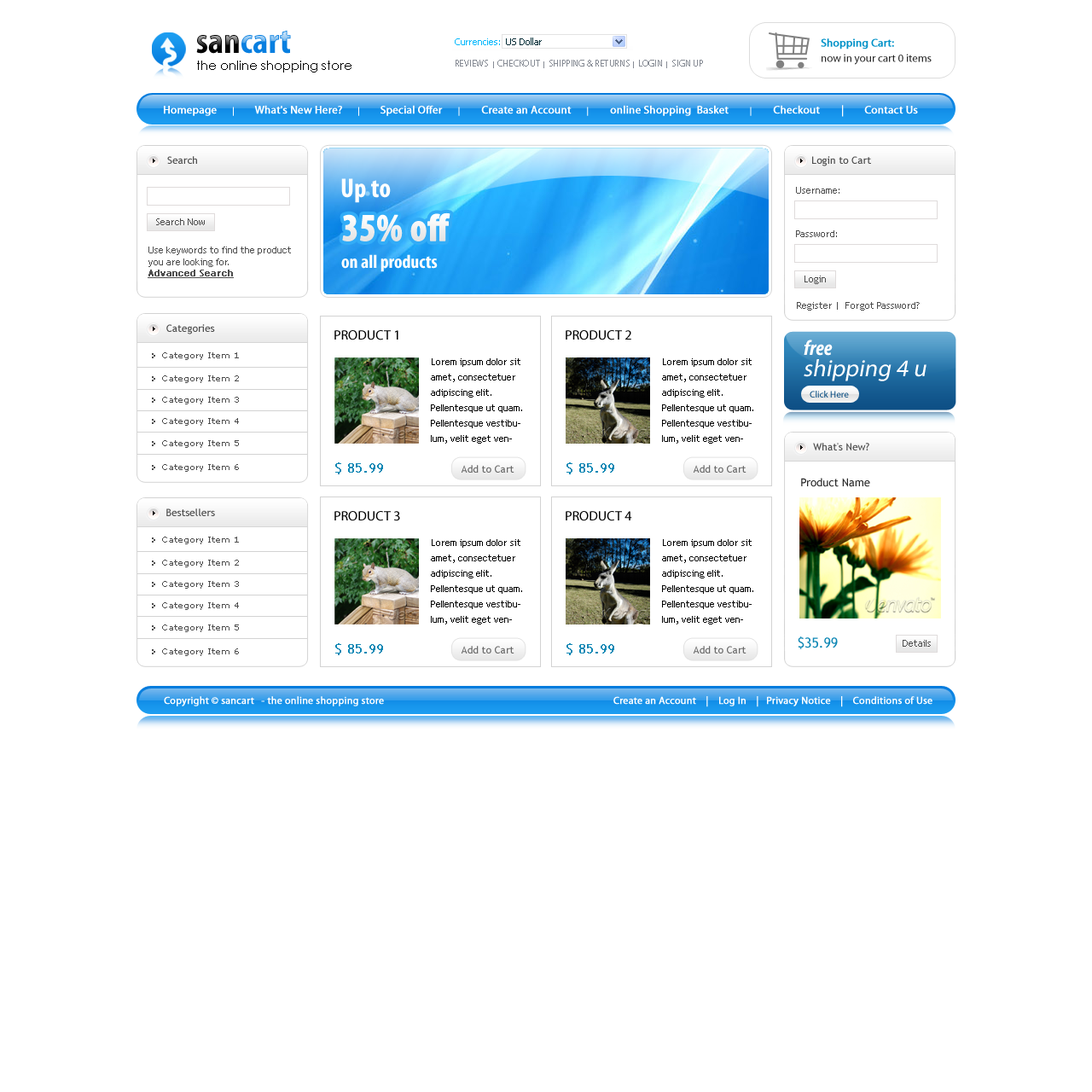
<style>
.page{position:relative;width:1092px;height:1092px;background:#ffffff}
.page>*{position:absolute;margin:0}
.t1{font:36.7px "MyriadPro-BoldCond"}
.t2{font:11.1px/15.4px "MyriadPro-Regular";color:#282828}
.t3{font:11.1px/15.4px "MyriadPro-Regular";color:#0292c8;font-weight:bold}
.t4{font:12.8px "CenturyGothic";color:#000000}
.t5{font:9.4px "MyriadPro-Regular";color:#868b94}
.t6{font:6.8px "MyriadPro-Regular";color:#868b94}
.t7{font:11.1px "MyriadPro-Regular";color:#ffffff;font-weight:bold}
.t8{font:8.5px "MyriadPro-Regular";color:#ffffff;font-weight:bold}
.t9{font:10.2px "TrebuchetMS";color:#4d4d4d}
.t10{font:27.3px "MyriadPro-BoldCond";color:#fefefe}
.t11{font:9.4px "TrebuchetMS";color:#4d4d4d}
.t12{font:38.4px "MyriadPro-BoldCond";color:#fefefe;font-weight:bold}
.t13{font:9.4px "TrebuchetMS";color:#4d4d4d;font-weight:bold;text-decoration:underline}
.t14{font:18.8px "MyriadPro-BoldCond";color:#fefefe}
.t15{font:13.6px "MyriadPro-Regular";color:#010101;text-transform:uppercase}
.t16{font:21.3px "MyriadPro-BoldCondIt";color:#ffffff}
.t17{font:8.5px "Verdana";color:#4d4d4d}
.t18{font:9.4px/15.4px "TrebuchetMS";color:#000000}
.t19{font:23.9px "MyriadPro-Regular";color:#ffffff;font-style:italic}
.t20{font:9.4px "MyriadPro-Regular";color:#064b80}
.t21{font:13.6px "TrebuchetMS";color:#1088b5;font-weight:bold}
.t22{font:10.2px "TrebuchetMS";color:#6a6a6a}
.t23{font:11.1px "TrebuchetMS";color:#292929}
.t24{font:13.6px "TrebuchetMS";color:#1088b5}
.t25{font:10.2px "MyriadPro-Regular";color:#ffffff;font-weight:bold}
</style>
<div class="page">
<p class="t1" style="left:196px;top:30px;width:95px;height:24px">sancart</p>
<p class="t2" style="left:821px;top:38px;width:111px;height:27px"><span class="t3">Shopping Cart: <br></span>now in your cart 0 items</p>
<p class="t4" style="left:197px;top:61px;width:154px;height:12px">the online shopping store</p>
<p class="t5" style="left:456px;top:60px;width:247px;height:8px">REVIEWS  <span class="t6">|  </span>CHECKOUT  <span class="t6">|  </span>SHIPPING &amp; RETURNS  <span class="t6">|  </span>LOGIN  <span class="t6">| </span> SIGN UP</p>
<p class="t7" style="left:164px;top:105px;width:754px;height:12px">Homepage     <span class="t8"> | </span>       What's New Here?     <span class="t8"> |  </span>      Special Offer      <span class="t8">|</span>        Create an Account     <span class="t8"> |</span>        online Shopping  Basket        <span class="t8">|</span>        Checkout        |        Contact Us</p>
<p class="t9" style="left:167px;top:156px;width:30px;height:8px">Search</p>
<p class="t9" style="left:812px;top:156px;width:59px;height:10px">Login to Cart</p>
<p class="t10" style="left:341px;top:178px;width:50px;height:25px">Up to</p>
<p class="t11" style="left:796px;top:187px;width:43px;height:7px">Username:</p>
<p class="t11" style="left:156px;top:218px;width:49px;height:7px">Search Now</p>
<p class="t12" style="left:342px;top:212px;width:108px;height:29px">35% off</p>
<p class="t11" style="left:796px;top:230px;width:41px;height:7px">Password:</p>
<p class="t11" style="left:148px;top:247px;width:143px;height:31px">Use keywords to find the product you are looking for.<br><span class="t13">Advanced Search</span></p>
<p class="t14" style="left:341px;top:254px;width:97px;height:18px">on all products</p>
<p class="t11" style="left:804px;top:276px;width:22px;height:8px">Login</p>
<p class="t11" style="left:797px;top:302px;width:123px;height:9px">Register |  Forgot Password?</p>
<p class="t9" style="left:166px;top:324px;width:49px;height:10px">Categories</p>
<p class="t15" style="left:334px;top:330px;width:64px;height:10px">Product 1</p>
<p class="t15" style="left:566px;top:330px;width:65px;height:10px">Product 2</p>
<p class="t16" style="left:804px;top:340px;width:29px;height:16px">free</p>
<p class="t17" style="left:162px;top:352px;width:77px;height:8px">Category Item 1</p>
<p class="t18" style="left:431px;top:358px;width:91px;height:86px">Lorem ipsum dolor sit amet, consectetuer adipiscing elit. Pellentesque ut quam. Pellentesque vestibulum, velit eget venenatis auct ...</p>
<p class="t18" style="left:662px;top:358px;width:91px;height:86px">Lorem ipsum dolor sit amet, consectetuer adipiscing elit. Pellentesque ut quam. Pellentesque vestibulum, velit eget venenatis auct ...</p>
<p class="t19" style="left:804px;top:359px;width:122px;height:22px">shipping 4 u</p>
<p class="t17" style="left:162px;top:375px;width:77px;height:8px">Category Item 2</p>
<p class="t17" style="left:162px;top:397px;width:77px;height:7px">Category Item 3</p>
<p class="t20" style="left:810px;top:391px;width:39px;height:7px">Click Here</p>
<p class="t17" style="left:162px;top:418px;width:77px;height:8px">Category Item 4</p>
<p class="t17" style="left:162px;top:440px;width:77px;height:8px">Category Item 5</p>
<p class="t9" style="left:813px;top:443px;width:56px;height:7px">What's New?</p>
<p class="t17" style="left:162px;top:464px;width:77px;height:8px">Category Item 6</p>
<p class="t21" style="left:335px;top:462px;width:48px;height:12px">$ 85.99</p>
<p class="t22" style="left:461px;top:465px;width:53px;height:8px">Add to Cart</p>
<p class="t21" style="left:566px;top:462px;width:48px;height:12px">$ 85.99</p>
<p class="t22" style="left:693px;top:465px;width:53px;height:8px">Add to Cart</p>
<p class="t23" style="left:801px;top:478px;width:69px;height:9px">Product Name</p>
<p class="t9" style="left:166px;top:508px;width:49px;height:8px">Bestsellers</p>
<p class="t15" style="left:334px;top:511px;width:66px;height:10px">Product 3</p>
<p class="t15" style="left:566px;top:511px;width:66px;height:10px">Product 4</p>
<p class="t17" style="left:162px;top:537px;width:77px;height:7px">Category Item 1</p>
<p class="t18" style="left:431px;top:539px;width:91px;height:85px">Lorem ipsum dolor sit amet, consectetuer adipiscing elit. Pellentesque ut quam. Pellentesque vestibulum, velit eget venenatis auct ...</p>
<p class="t18" style="left:662px;top:539px;width:91px;height:85px">Lorem ipsum dolor sit amet, consectetuer adipiscing elit. Pellentesque ut quam. Pellentesque vestibulum, velit eget venenatis auct ...</p>
<p class="t17" style="left:162px;top:560px;width:77px;height:7px">Category Item 2</p>
<p class="t17" style="left:162px;top:581px;width:77px;height:8px">Category Item 3</p>
<p class="t17" style="left:162px;top:602px;width:77px;height:8px">Category Item 4</p>
<p class="t17" style="left:162px;top:624px;width:77px;height:8px">Category Item 5</p>
<p class="t24" style="left:798px;top:636px;width:40px;height:13px">$35.99</p>
<p class="t11" style="left:903px;top:640px;width:28px;height:7px">Details</p>
<p class="t17" style="left:162px;top:648px;width:77px;height:8px">Category Item 6</p>
<p class="t21" style="left:335px;top:643px;width:48px;height:12px">$ 85.99</p>
<p class="t22" style="left:461px;top:646px;width:53px;height:7px">Add to Cart</p>
<p class="t21" style="left:566px;top:643px;width:48px;height:12px">$ 85.99</p>
<p class="t22" style="left:693px;top:646px;width:53px;height:7px">Add to Cart</p>
<p class="t25" style="left:164px;top:696px;width:220px;height:10px">Copyright © sancart   - the online shopping store</p>
<p class="t25" style="left:613px;top:696px;width:319px;height:11px">Create an Account    |    Log In    |   Privacy Notice    |    Conditions of Use</p>
</div>
